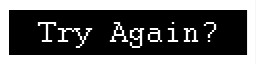
<style>
.page{position:relative;width:256px;height:64px;background:#000000}
.page>*{position:absolute;margin:0}
.t1{font:32px "Courier";color:#ffffff}
</style>
<div class="page">
<p class="t1" style="left:37px;top:22px;width:180px;height:26px">Try Again?</p>
</div>
